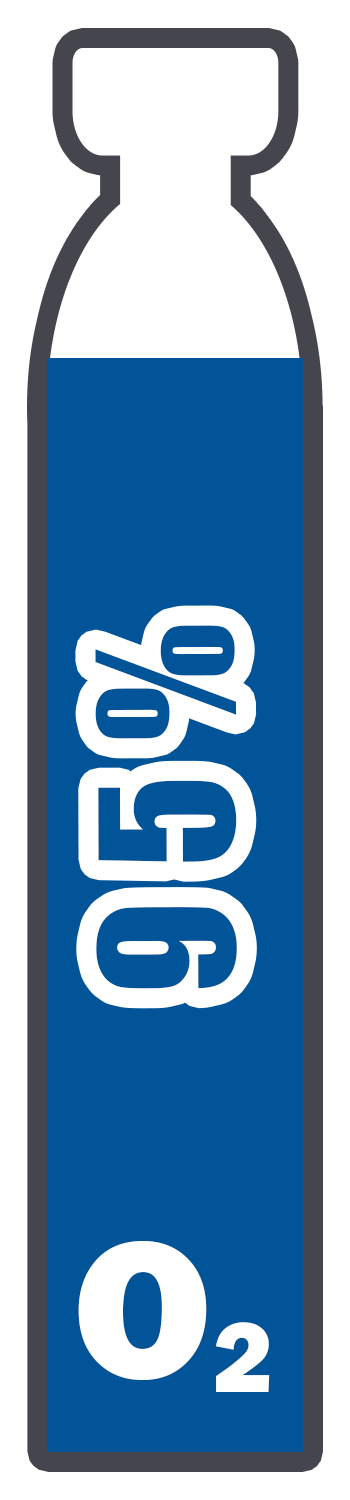
<style>
.page{position:relative;width:350px;height:1500px;background:#005497}
.page>*{position:absolute;margin:0}
.t1{font:171.1px "Impact";letter-spacing:0.2em;color:#005497}
.t2{font:201.7px "FranklinGothic-Heavy";letter-spacing:0.2em;color:#ffffff}
.t3{font:103.5px "FranklinGothic-Heavy";letter-spacing:0.2em;color:#ffffff}
</style>
<div class="page">
<p class="t1" style="left:95px;top:625px;width:142px;height:364px;rotate:-90deg">95%</p>
<p class="t2" style="left:78px;top:1241px;width:129px;height:139px">O</p>
<p class="t3" style="left:216px;top:1322px;width:54px;height:70px">2</p>
</div>
